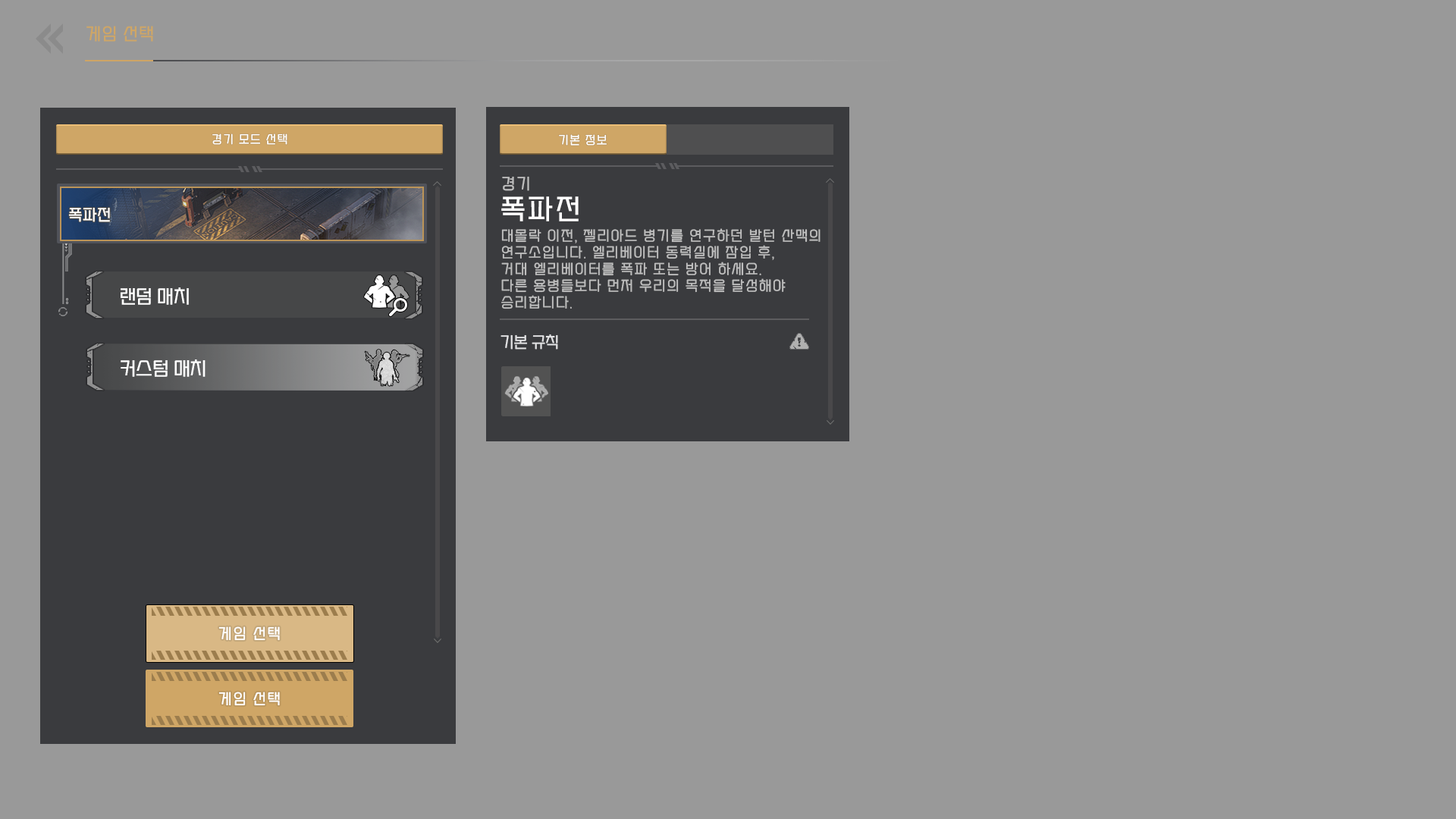
<style>
.page{position:relative;width:1456px;height:819px;background:#999999}
.page>*{position:absolute;margin:0}
.t1{font:11.4px "SEBANGGothic";letter-spacing:0.1em;color:#ffffff}
.t2{font:15.2px "SEBANGGothic";letter-spacing:0.1em;color:#bebebe}
.t3{font:27.3px "SEBANGGothic";letter-spacing:0.1em;color:#ffffff}
.t4{font:15.2px "SEBANGGothic";letter-spacing:0.05em;color:#fefeff}
.t5{font:13.6px/16.7px "SEBANGGothic";letter-spacing:0.1em;color:#bebebe}
.t6{font:18.2px "SEBANGGothic";color:#ffffff}
.t7{font:15.2px "SEBANGGothic";color:#e3e3e5}
.t8{font:14.4px "SEBANGGothic";letter-spacing:0.1em;color:#ffffff}
</style>
<div class="page">
<p class="t1" style="left:559px;top:134px;width:48px;height:12px">기본 정보</p>
<p class="t2" style="left:502px;top:176px;width:27px;height:15px">경기</p>
<p class="t3" style="left:501px;top:196px;width:78px;height:25px">폭파전</p>
<p class="t4" style="left:68px;top:207px;width:42px;height:15px">폭파전</p>
<p class="t5" style="left:501px;top:228px;width:320px;height:81px">대몰락 이전, 젤리아드 병기를 연구하던 발턴 산맥의 <br>연구소입니다. 엘리베이터 동력실에 잠입 후, <br>거대 엘리베이터를 폭파 또는 방어 하세요. <br>다른 용병들보다 먼저 우리의 목적을 달성해야 <br>승리합니다.</p>
<p class="t6" style="left:121px;top:287px;width:68px;height:18px">랜덤 매치</p>
<p class="t7" style="left:500px;top:334px;width:58px;height:16px">기본 규칙</p>
<p class="t6" style="left:121px;top:359px;width:85px;height:18px">커스텀 매치</p>
<p class="t8" style="left:218px;top:626px;width:62px;height:15px">게임 선택</p>
<p class="t8" style="left:218px;top:692px;width:62px;height:14px">게임 선택</p>
</div>
